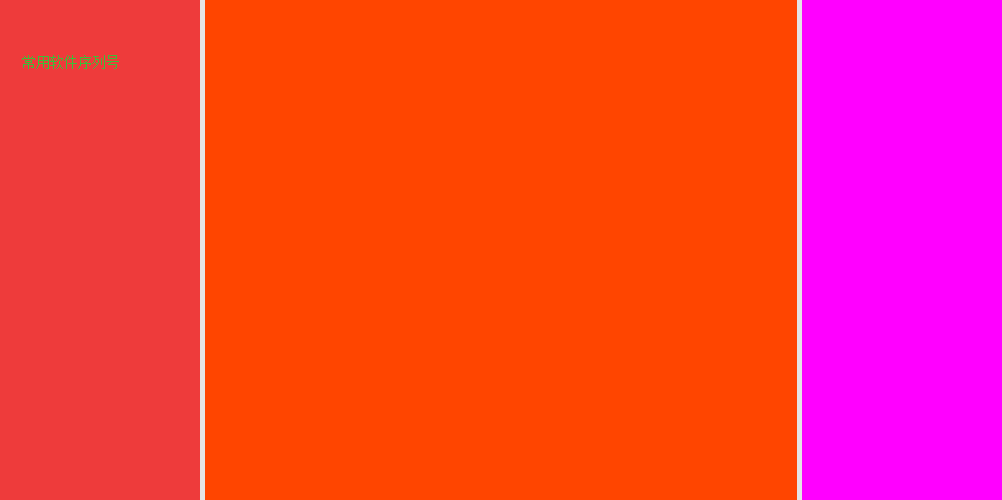
<style>
.page{position:relative;width:1002px;height:500px;background:#ff4500}
.page>*{position:absolute;margin:0}
.t1{font:14px "SimSun";color:#3bbf38}
</style>
<div class="page">
<p class="t1" style="left:22px;top:55px;width:97px;height:14px">常用软件序列号</p>
</div>
